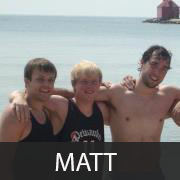
<style>
.page{position:relative;width:180px;height:180px}
.page>*{position:absolute;margin:0}
.t1{font:26.7px "MyriadPro-Regular";color:#faf7f7}
</style>
<div class="page">
<p class="t1" style="left:55px;top:153px;width:62px;height:18px">MATT</p>
</div>
